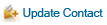
<style>
.page{position:relative;width:107px;height:25px;background:#ffffff}
.page>*{position:absolute;margin:0}
.t1{font:12px "MicrosoftSansSerif";letter-spacing:-0.02em;color:#006699}
</style>
<div class="page">
<p class="t1" style="left:23px;top:8px;width:80px;height:11px">Update Contact</p>
</div>
